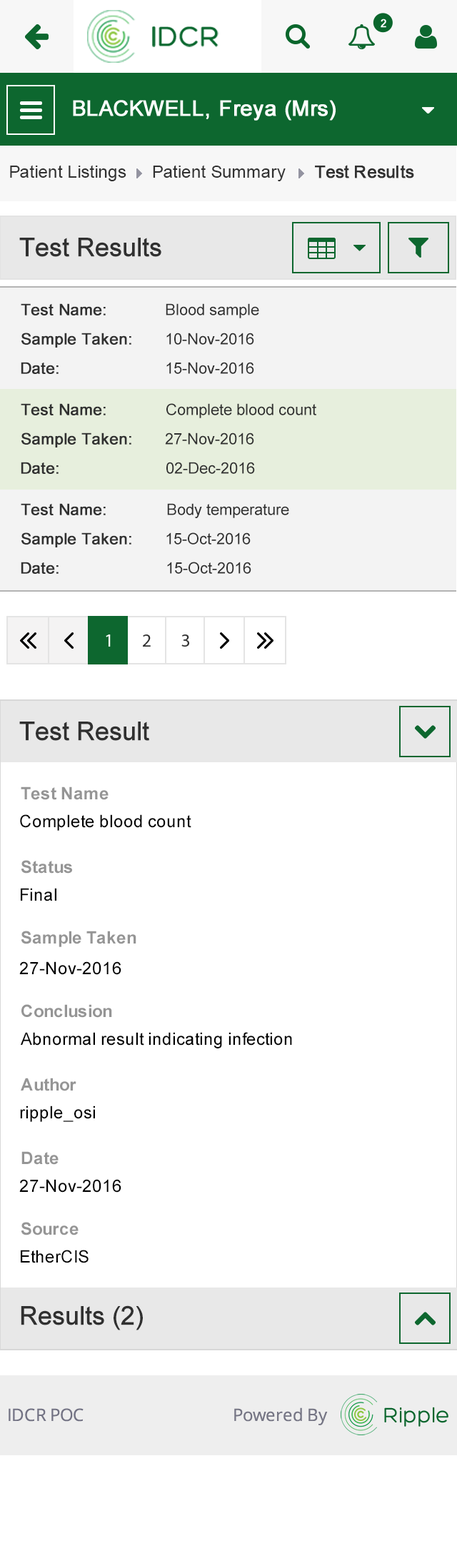
<style>
.page{position:relative;width:457px;height:1568px;background:#ffffff}
.page>*{position:absolute;margin:0}
.t1{font:17.1px "ArialMT";color:#313131}
.t2{font:17.1px "ArialMT";color:#313131;font-weight:bold}
.t3{font:25.7px "ArialMT";color:#303030;font-weight:bold}
.t4{font:15.7px "ArialMT";color:#303030;font-weight:bold}
.t5{font:15.7px "ArialMT";color:#303030}
.t6{font:17.1px "Arial-BoldMT";color:#959595}
.t7{font:17.1px "ArialMT";color:#000000}
</style>
<div class="page">
<p class="t1" style="left:10px;top:165px;width:116px;height:16px">Patient Listings</p>
<p class="t1" style="left:153px;top:165px;width:132px;height:16px">Patient Summary</p>
<p class="t2" style="left:315px;top:165px;width:99px;height:13px">Test Results</p>
<p class="t3" style="left:19px;top:238px;width:142px;height:19px">Test Results</p>
<p class="t4" style="left:21px;top:303px;width:85px;height:12px">Test Name:</p>
<p class="t5" style="left:166px;top:303px;width:93px;height:15px">Blood sample</p>
<p class="t4" style="left:21px;top:333px;width:110px;height:15px">Sample Taken:</p>
<p class="t5" style="left:166px;top:333px;width:88px;height:12px">10-Nov-2016</p>
<p class="t4" style="left:21px;top:362px;width:38px;height:12px">Date:</p>
<p class="t5" style="left:166px;top:362px;width:88px;height:12px">15-Nov-2016</p>
<p class="t4" style="left:21px;top:403px;width:85px;height:12px">Test Name:</p>
<p class="t5" style="left:166px;top:403px;width:150px;height:15px">Complete blood count</p>
<p class="t4" style="left:21px;top:433px;width:110px;height:14px">Sample Taken:</p>
<p class="t5" style="left:165px;top:433px;width:89px;height:12px">27-Nov-2016</p>
<p class="t4" style="left:21px;top:462px;width:38px;height:12px">Date:</p>
<p class="t5" style="left:166px;top:462px;width:89px;height:12px">02-Dec-2016</p>
<p class="t4" style="left:21px;top:503px;width:85px;height:12px">Test Name:</p>
<p class="t5" style="left:167px;top:503px;width:122px;height:15px">Body temperature</p>
<p class="t4" style="left:21px;top:532px;width:110px;height:15px">Sample Taken:</p>
<p class="t5" style="left:166px;top:532px;width:85px;height:13px">15-Oct-2016</p>
<p class="t4" style="left:21px;top:562px;width:38px;height:12px">Date:</p>
<p class="t5" style="left:167px;top:562px;width:84px;height:12px">15-Oct-2016</p>
<p class="t3" style="left:19px;top:722px;width:130px;height:19px">Test Result</p>
<p class="t6" style="left:21px;top:786px;width:87px;height:14px">Test Name</p>
<p class="t7" style="left:20px;top:814px;width:171px;height:17px">Complete blood count</p>
<p class="t6" style="left:21px;top:860px;width:51px;height:14px">Status</p>
<p class="t7" style="left:21px;top:888px;width:35px;height:13px">Final</p>
<p class="t6" style="left:21px;top:931px;width:115px;height:16px">Sample Taken</p>
<p class="t7" style="left:19px;top:961px;width:102px;height:14px">27-Nov-2016</p>
<p class="t6" style="left:21px;top:1004px;width:91px;height:14px">Conclusion</p>
<p class="t7" style="left:21px;top:1032px;width:271px;height:16px">Abnormal result indicating infection</p>
<p class="t6" style="left:21px;top:1078px;width:55px;height:13px">Author</p>
<p class="t7" style="left:20px;top:1106px;width:75px;height:16px">ripple_osi</p>
<p class="t6" style="left:21px;top:1151px;width:38px;height:14px">Date</p>
<p class="t7" style="left:19px;top:1179px;width:102px;height:14px">27-Nov-2016</p>
<p class="t6" style="left:21px;top:1222px;width:58px;height:13px">Source</p>
<p class="t7" style="left:21px;top:1250px;width:67px;height:13px">EtherCIS</p>
<p class="t3" style="left:21px;top:1305px;width:122px;height:25px">Results (2)</p>
</div>
